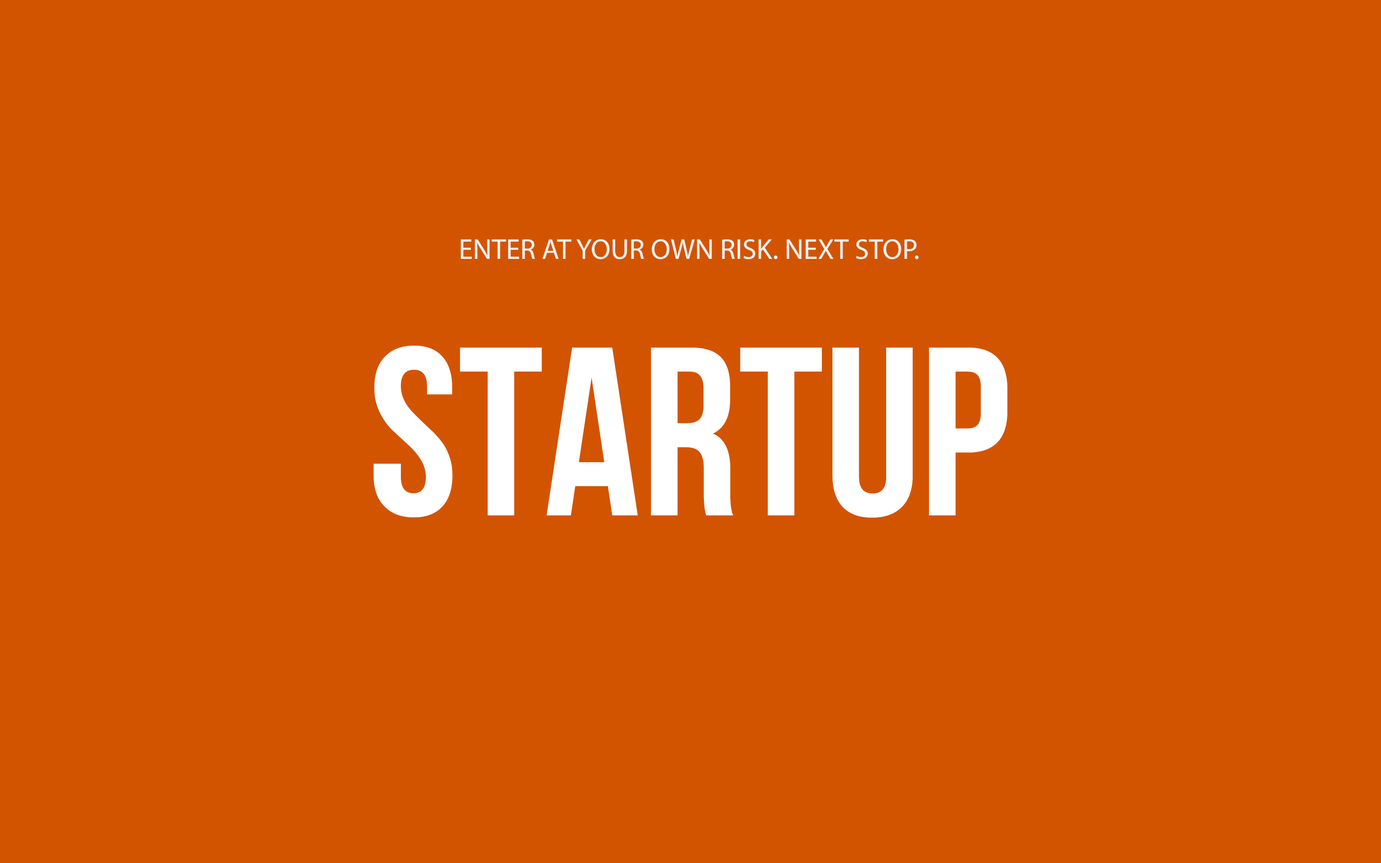
<style>
.page{position:relative;width:1381px;height:863px;background:#d35400}
.page>*{position:absolute;margin:0}
.t1{font:28.8px "MyriadPro-Regular";color:#ffffff;text-transform:uppercase}
.t2{font:239.8px "BebasNeue";color:#ffffff;text-transform:uppercase}
</style>
<div class="page">
<p class="t1" style="left:461px;top:239px;width:458px;height:20px">Enter at your own risk. next stop.</p>
<p class="t2" style="left:374px;top:346px;width:634px;height:172px">STARTUP</p>
</div>
